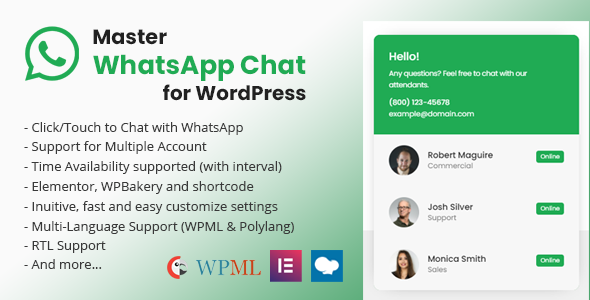
<style>
.page{position:relative;width:590px;height:300px;background:#fafafa}
.page>*{position:absolute;margin:0}
.t1{font:20.8px "Poppins-Bold";color:#212121}
.t2{font:26px "Poppins-Bold";color:#20ab54}
.t3{font:19.9px "Poppins-Bold";color:#212121}
.t4{font:13px "OpenSans-Regular";color:#393939}
</style>
<div class="page">
<p class="t1" style="left:93px;top:29px;width:74px;height:16px">Master</p>
<p class="t2" style="left:93px;top:54px;width:213px;height:27px">WhatsApp Chat</p>
<p class="t3" style="left:163px;top:84px;width:143px;height:17px">for WordPress</p>
<p class="t4" style="left:24px;top:122px;width:219px;height:13px">- Click/Touch to Chat with WhatsApp</p>
<p class="t4" style="left:24px;top:141px;width:183px;height:13px">- Support for Multiple Account</p>
<p class="t4" style="left:24px;top:161px;width:258px;height:13px">- Time Availability supported (with interval)</p>
<p class="t4" style="left:24px;top:181px;width:230px;height:13px">- Elementor, WPBakery and shortcode</p>
<p class="t4" style="left:24px;top:201px;width:254px;height:13px">- Inuitive, fast and easy customize settings</p>
<p class="t4" style="left:24px;top:221px;width:270px;height:13px">- Multi-Language Support (WPML &amp; Polylang)</p>
<p class="t4" style="left:24px;top:241px;width:82px;height:12px">- RTL Support</p>
<p class="t4" style="left:24px;top:259px;width:78px;height:10px">- And more...</p>
</div>
